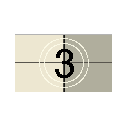
<style>
.page{position:relative;width:128px;height:128px;background:#ffffff}
.page>*{position:absolute;margin:0}
.t1{font:40px "Helvetica";letter-spacing:0.025em;color:#000000}
</style>
<div class="page">
<p class="t1" style="left:55px;top:49px;width:19px;height:29px">3</p>
</div>
